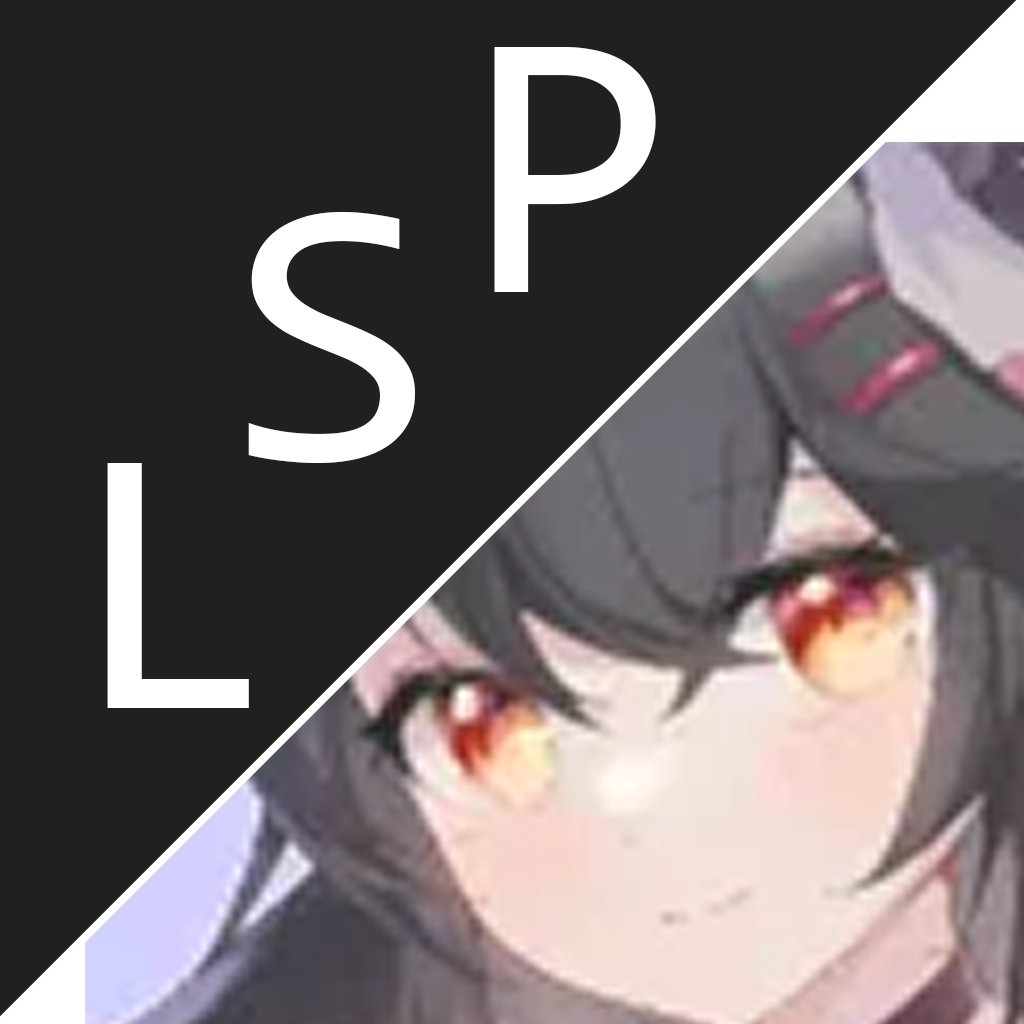
<style>
.page{position:relative;width:1024px;height:1024px;background:#202020}
.page>*{position:absolute;margin:0}
.t1{font:384px "Consolas";color:#ffffff}
</style>
<div class="page">
<p class="t1" style="left:494px;top:47px;width:162px;height:245px">P</p>
<p class="t1" style="left:248px;top:212px;width:167px;height:251px">S</p>
<p class="t1" style="left:107px;top:463px;width:142px;height:245px">L</p>
</div>
